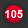
<style>
.page{position:relative;width:28px;height:28px;background:#333333}
.page>*{position:absolute;margin:0}
.t1{font:11px "Arial-BoldMT";color:#ffffff}
</style>
<div class="page">
<p class="t1" style="left:5px;top:10px;width:18px;height:8px">105</p>
</div>
